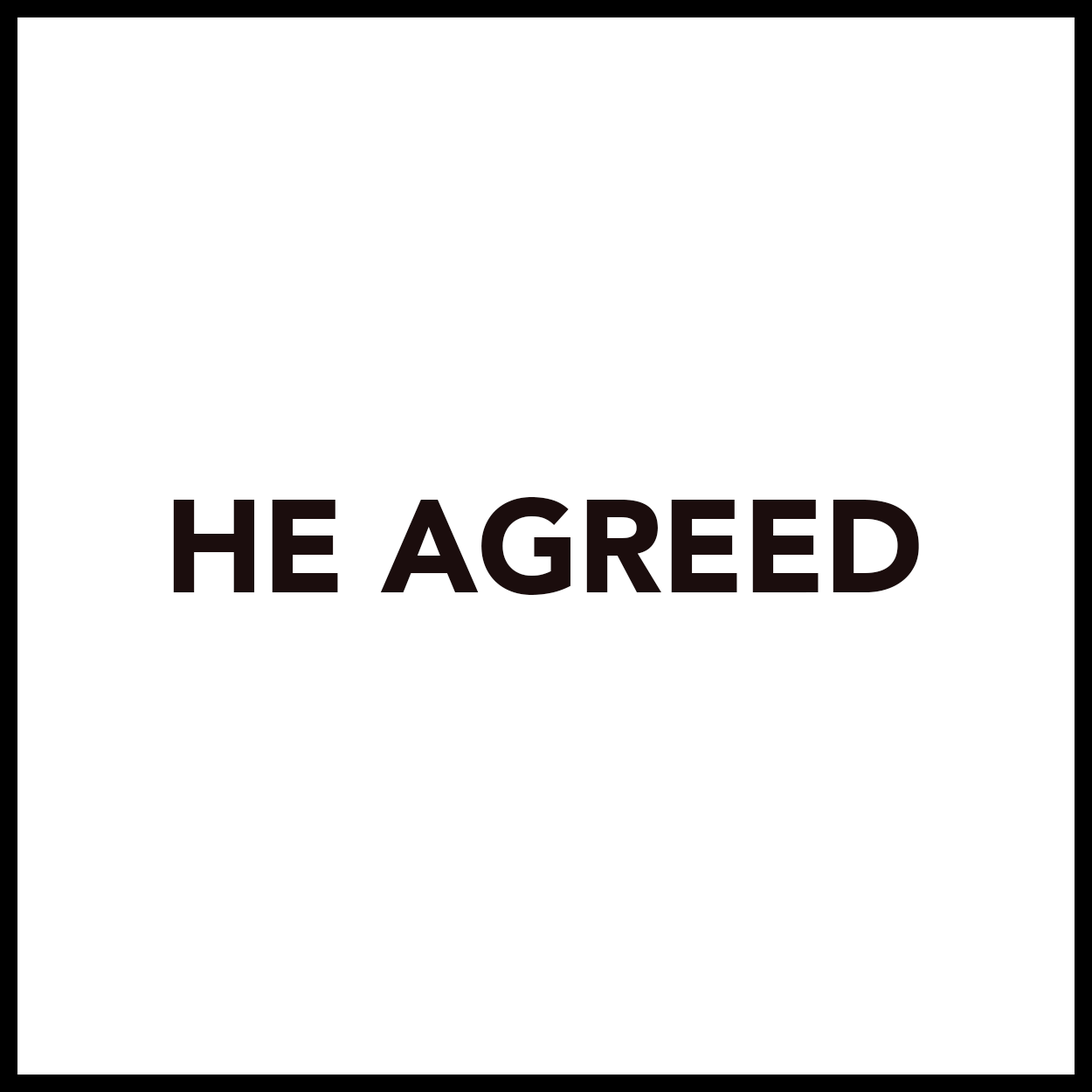
<style>
.page{position:relative;width:1092px;height:1092px;background:#ffffff}
.page>*{position:absolute;margin:0}
.t1{font:131px "Avenir-Black";letter-spacing:-0.01em;color:#1b0d0d}
</style>
<div class="page">
<p class="t1" style="left:173px;top:497px;width:746px;height:98px">HE AGREED</p>
</div>
